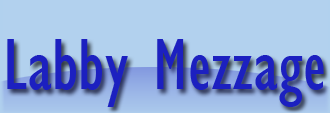
<style>
.page{position:relative;width:330px;height:113px;background:#b2d1ee}
.page>*{position:absolute;margin:0}
.t1{font:75px "GillSansMT-Condensed";color:#1c20c0}
</style>
<div class="page">
<p class="t1" style="left:7px;top:39px;width:317px;height:68px">Labby Mezzage</p>
</div>
